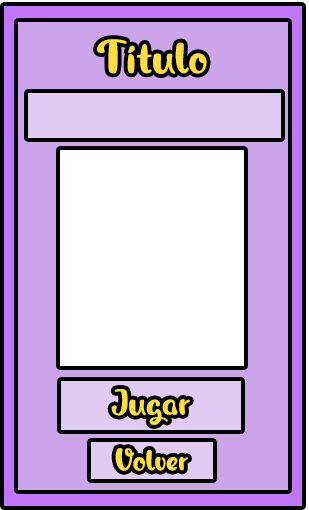
<style>
.page{position:relative;width:309px;height:510px;background:#cba4e9}
.page>*{position:absolute;margin:0}
.t1{font:48px "MagicOwl-PersonalUse";color:#ffde43}
.t2{font:37.3px "MagicOwl-PersonalUse";color:#ffde43}
.t3{font:32px "MagicOwl-PersonalUse";color:#ffde43}
</style>
<div class="page">
<p class="t1" style="left:97px;top:39px;width:110px;height:35px">Título</p>
<p class="t2" style="left:111px;top:389px;width:79px;height:36px">Jugar</p>
<p class="t3" style="left:115px;top:448px;width:73px;height:23px">Volver</p>
</div>
